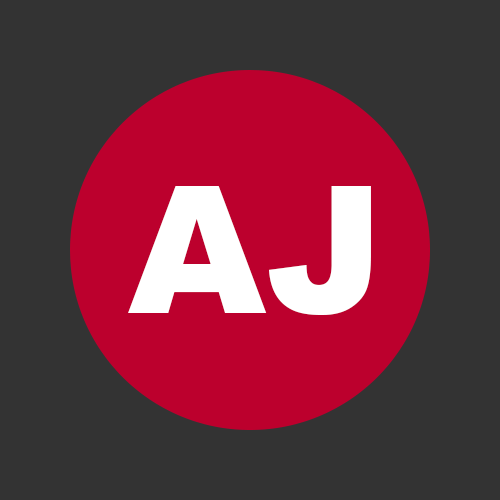
<style>
.page{position:relative;width:500px;height:500px;background:#333333}
.page>*{position:absolute;margin:0}
.t1{font:177.6px "Arial-Black";color:#ffffff}
</style>
<div class="page">
<p class="t1" style="left:128px;top:186px;width:139px;height:127px">A</p>
<p class="t1" style="left:269px;top:186px;width:102px;height:129px">J</p>
</div>
